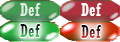
<style>
.page{position:relative;width:120px;height:42px}
.page>*{position:absolute;margin:0}
.t1{font:18px "Rockwell-Condensed";letter-spacing:0.025em;color:#ddece1}
.t2{font:18px "Rockwell-Condensed";letter-spacing:0.025em;color:#ffffff}
.t3{font:18px "Rockwell-Condensed";letter-spacing:0.025em}
</style>
<div class="page">
<p class="t1" style="left:20px;top:3px;width:21px;height:13px">Def</p>
<p class="t2" style="left:81px;top:3px;width:21px;height:13px">Def</p>
<p class="t3" style="left:20px;top:24px;width:21px;height:13px">Def</p>
<p class="t3" style="left:81px;top:25px;width:21px;height:13px">Def</p>
</div>
